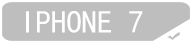
<style>
.page{position:relative;width:192px;height:48px;background:#bebebe}
.page>*{position:absolute;margin:0}
.t1{font:31.8px "SimHei";color:#ffffff;scale:0.97 1}
</style>
<div class="page">
<p class="t1" style="left:26px;top:11px;width:117px;height:22px">IPHONE 7</p>
</div>
